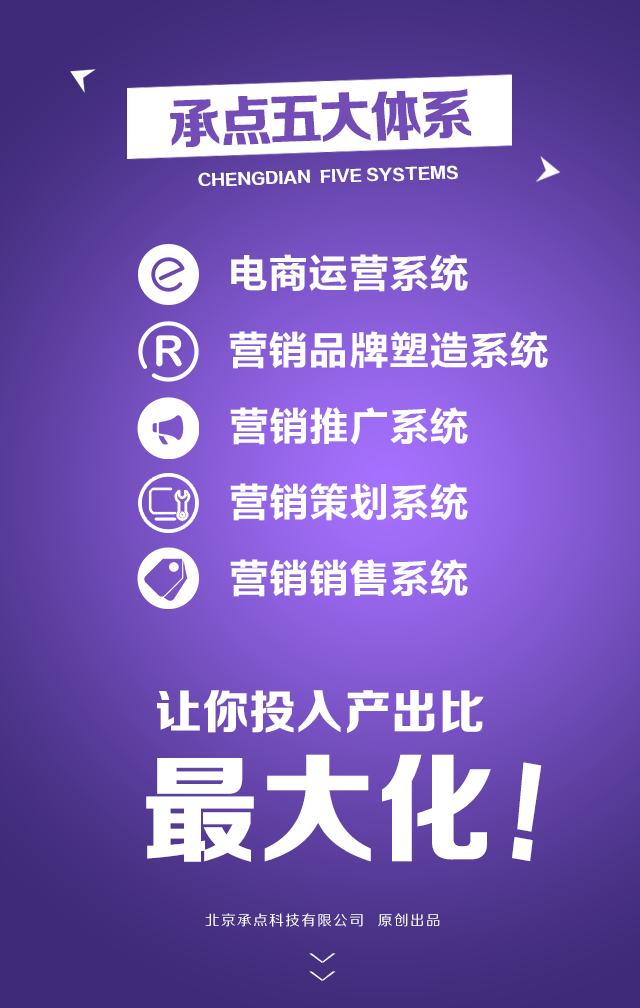
<style>
.page{position:relative;width:640px;height:1008px}
.page>*{position:absolute;margin:0}
.t1{font:54.9px "FZZDHJW--GB1-0";letter-spacing:-0.05em;color:#734cb6;text-transform:uppercase;scale:0.97 1}
.t2{font:15.6px "FZZDHJW--GB1-0";letter-spacing:0.005em;color:#ffffff;text-transform:uppercase}
.t3{font:40px "FZLTCHK--GBK1-0";color:#fffefe;text-transform:uppercase}
.t4{font:40px "FZLTCHJW--GB1-0";color:#ffffff;text-transform:uppercase}
.t5{font:47.1px "FZZDHJW--GB1-0";letter-spacing:0.005em;color:#ffffff;text-transform:uppercase}
.t6{font:118.8px "FZZDHJW--GB1-0";letter-spacing:0.005em;color:#ffffff;text-transform:uppercase}
.t7{font:113.8px "FZZDHJW--GB1-0";letter-spacing:0.005em;color:#ffffff;text-transform:uppercase;scale:0.83 1}
.t8{font:14.2px "FZZHJW--GB1-0";letter-spacing:0.1em;color:#ffffff;text-transform:uppercase}
.t9{font:36.8px "FZZXHJW--GB1-0";letter-spacing:0.5em;color:#ffffff;text-transform:uppercase;scale:0.44 1}
</style>
<div class="page">
<p class="t1" style="left:170px;top:89px;width:302px;height:59px;rotate:-2deg">承点五大体系</p>
<p class="t2" style="left:198px;top:165px;width:260px;height:21px;rotate:-2deg">CHENGDIAN  five systems</p>
<p class="t3" style="left:231px;top:254px;width:237px;height:38px">电商运营系统</p>
<p class="t4" style="left:229px;top:331px;width:319px;height:38px">营销品牌塑造系统</p>
<p class="t4" style="left:230px;top:407px;width:238px;height:38px">营销推广系统</p>
<p class="t4" style="left:230px;top:483px;width:238px;height:38px">营销策划系统</p>
<p class="t4" style="left:230px;top:559px;width:238px;height:38px">营销销售系统</p>
<p class="t5" style="left:157px;top:690px;width:327px;height:43px">让你投入产出比</p>
<p class="t6" style="left:146px;top:754px;width:345px;height:108px">最大化</p>
<p class="t7" style="left:512px;top:762px;width:30px;height:100px;rotate:10deg">!</p>
<p class="t8" style="left:205px;top:913px;width:235px;height:14px">北京承点科技有限公司  原创出品</p>
<p class="t9" style="left:309px;top:953px;width:27px;height:28px;rotate:90deg">&gt;&gt;</p>
</div>
